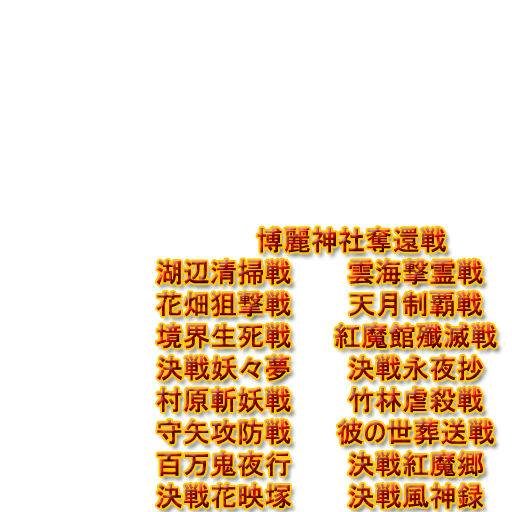
<style>
.page{position:relative;width:512px;height:512px;background:#ffffff}
.page>*{position:absolute;margin:0}
.t1{font:27px "MS-UIGothic";font-weight:bold}
</style>
<div class="page">
<p class="t1" style="left:257px;top:227px;width:189px;height:26px">博麗神社奪還戦</p>
<p class="t1" style="left:156px;top:259px;width:135px;height:26px">湖辺清掃戦</p>
<p class="t1" style="left:348px;top:259px;width:135px;height:26px">雲海撃霊戦</p>
<p class="t1" style="left:157px;top:291px;width:134px;height:26px">花畑狙撃戦</p>
<p class="t1" style="left:349px;top:291px;width:133px;height:26px">天月制覇戦</p>
<p class="t1" style="left:156px;top:323px;width:135px;height:26px">境界生死戦</p>
<p class="t1" style="left:335px;top:323px;width:162px;height:26px">紅魔館殲滅戦</p>
<p class="t1" style="left:157px;top:355px;width:133px;height:26px">決戦妖々夢</p>
<p class="t1" style="left:348px;top:355px;width:135px;height:26px">決戦永夜抄</p>
<p class="t1" style="left:156px;top:387px;width:135px;height:26px">村原斬妖戦</p>
<p class="t1" style="left:348px;top:387px;width:135px;height:26px">竹林虐殺戦</p>
<p class="t1" style="left:157px;top:419px;width:134px;height:26px">守矢攻防戦</p>
<p class="t1" style="left:337px;top:419px;width:157px;height:26px">彼の世葬送戦</p>
<p class="t1" style="left:157px;top:451px;width:134px;height:26px">百万鬼夜行</p>
<p class="t1" style="left:348px;top:451px;width:135px;height:26px">決戦紅魔郷</p>
<p class="t1" style="left:156px;top:483px;width:135px;height:26px">決戦花映塚</p>
<p class="t1" style="left:348px;top:483px;width:135px;height:26px">決戦風神録</p>
</div>
